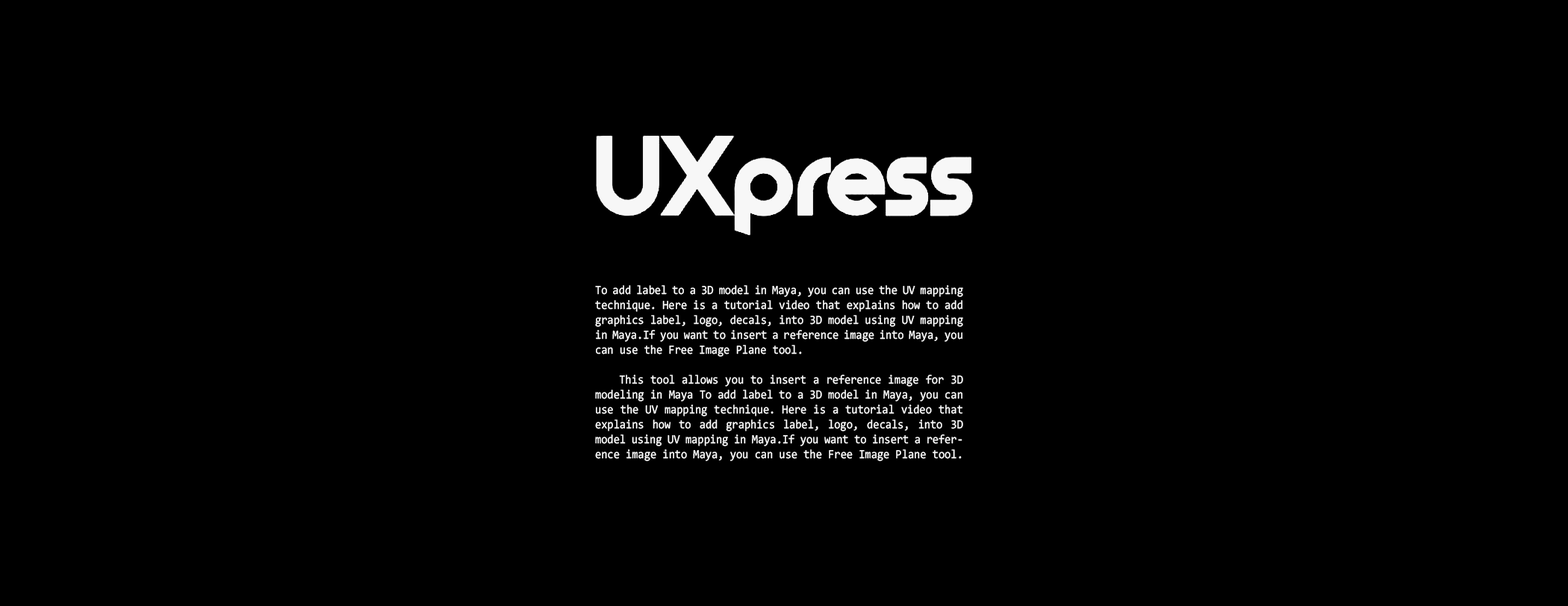
<style>
.page{position:relative;width:1568px;height:606px;background:#000000}
.page>*{position:absolute;margin:0}
.t1{font:12.4px "Consolas";color:#ffffff;scale:0.89 1}
</style>
<div class="page">
<p class="t1" style="left:595px;top:285px;width:368px;height:176px;text-align:justify">To add label to a 3D model in Maya, you can use the UV mapping technique. Here is a tutorial video that explains how to add graphics label, logo, decals, into 3D model using UV mapping in Maya.If you want to insert a reference image into Maya, you can use the Free Image Plane tool. <br><br> This tool allows you to insert a reference image for 3D modeling in Maya To add label to a 3D model in Maya, you can use the UV mapping technique. Here is a tutorial video that explains how to add graphics label, logo, decals, into 3D model using UV mapping in Maya.If you want to insert a reference image into Maya, you can use the Free Image Plane tool. This tool allows you to insert a reference image for 3D modeling in Maya.</p>
</div>
